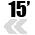
<style>
.page{position:relative;width:35px;height:35px;background:#ffffff}
.page>*{position:absolute;margin:0}
.t1{font:20px "Impact";color:#000000}
</style>
<div class="page">
<p class="t1" style="left:8px;top:1px;width:22px;height:16px">15’</p>
</div>
